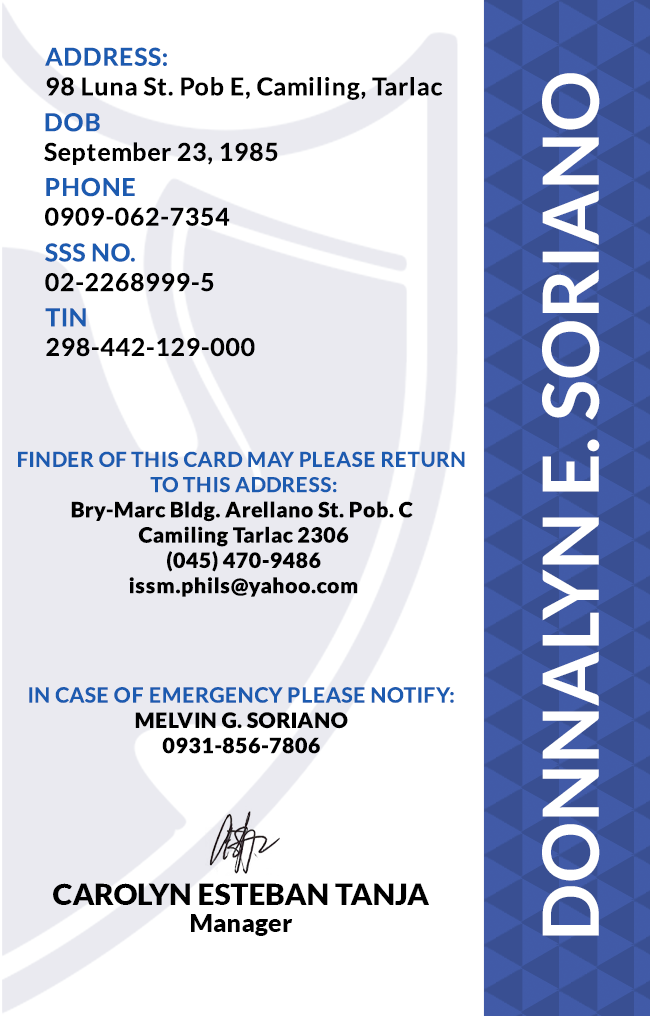
<style>
.page{position:relative;width:650px;height:1016px;background:#ffffff}
.page>*{position:absolute;margin:0}
.t1{font:24.7px/29.6px "Lato-Bold";letter-spacing:0.025em;color:#000000}
.t2{font:77.6px "Lato-Bold";color:#ffffff}
.t3{font:24.7px/29.6px "Lato-Bold";letter-spacing:0.025em}
.t4{font:21.1px "Lato-Black";letter-spacing:0.025em}
.t5{font:20.5px/25.3px "Lato-Bold";letter-spacing:0.025em;text-transform:uppercase}
.t6{font:21.1px/25.3px "Lato-Bold";letter-spacing:0.025em}
.t7{font:29.5px "Lato-Black";color:#000000}
.t8{font:25px "Lato-Black";color:#000000}
</style>
<div class="page">
<p class="t1" style="left:45px;top:47px;width:398px;height:53px">ADDRESS:<br>98 Luna St. Pob E, Camiling, Tarlac</p>
<p class="t2" style="left:542px;top:73px;width:58px;height:863px;rotate:-90deg">DONNALYN E. SORIANO</p>
<p class="t1" style="left:44px;top:113px;width:234px;height:52px">DOB<br>September 23, 1985</p>
<p class="t3" style="left:45px;top:177px;width:185px;height:49px">PHONE <br>0909-062-7354</p>
<p class="t3" style="left:45px;top:243px;width:169px;height:49px">SSS NO.<br>02-2268999-5</p>
<p class="t1" style="left:45px;top:308px;width:210px;height:49px">TIN<br>298-442-129-000</p>
<p class="t4" style="left:18px;top:451px;width:447px;height:146px;text-align:center"><span class="t5">Finder of this card may please return <br>to this address:<br></span>Bry-Marc Bldg. Arellano St. Pob. C <br>Camiling Tarlac 2306<br>(045) 470-9486<br>issm.phils@yahoo.com</p>
<p class="t6" style="left:29px;top:687px;width:425px;height:67px;text-align:center">IN CASE OF EMERGENCY PLEASE NOTIFY:<br><span class="t4">MELVIN G. SORIANO<br>0931-856-7806</span></p>
<p class="t7" style="left:53px;top:883px;width:376px;height:22px">CAROLYN ESTEBAN TANJA</p>
<p class="t8" style="left:191px;top:914px;width:102px;height:22px">Manager</p>
</div>
